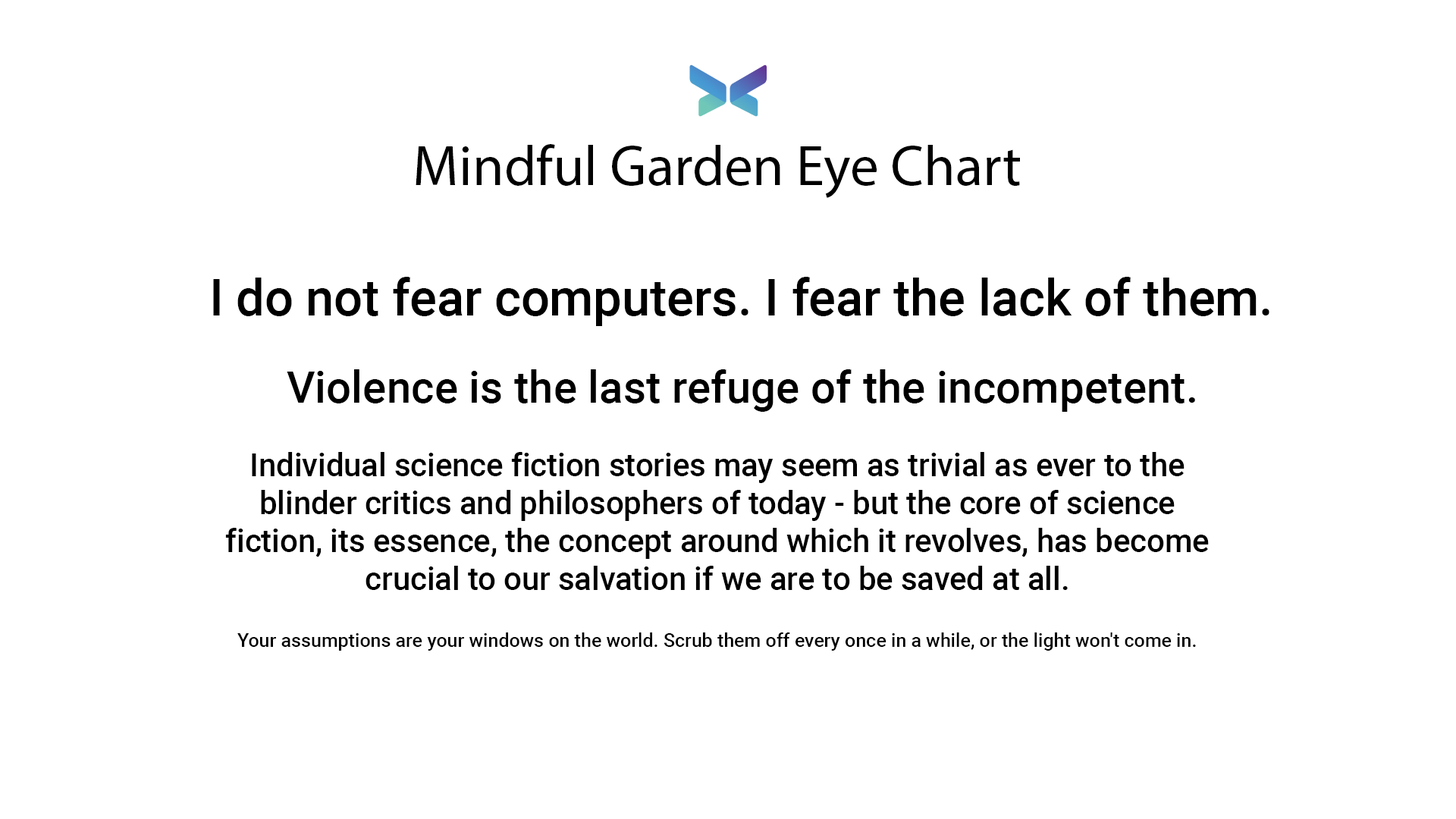
<style>
.page{position:relative;width:1456px;height:819px;background:#ffffff}
.page>*{position:absolute;margin:0}
.t1{font:56.9px "MyriadPro-Regular";color:#000000}
.t2{font:50.6px "Roboto-Medium";color:#000000}
.t3{font:44.2px "Roboto-Medium";color:#000000}
.t4{font:31.6px "Roboto-Medium";color:#000000}
.t5{font:19px "Roboto-Medium";color:#000000}
</style>
<div class="page">
<p class="t1" style="left:416px;top:144px;width:604px;height:54px">Mindful Garden Eye Chart</p>
<p class="t2" style="left:213px;top:277px;width:1056px;height:49px">I do not fear computers. I fear the lack of them.</p>
<p class="t3" style="left:287px;top:369px;width:908px;height:43px">Violence is the last refuge of the incompetent.</p>
<p class="t4" style="left:225px;top:452px;width:984px;height:138px;text-align:center">Individual science fiction stories may seem as trivial as ever to the blinder critics and philosophers of today - but the core of science fiction, its essence, the concept around which it revolves, has become crucial to our salvation if we are to be saved at all.</p>
<p class="t5" style="left:237px;top:632px;width:959px;height:19px">Your assumptions are your windows on the world. Scrub them off every once in a while, or the light won't come in.</p>
</div>
